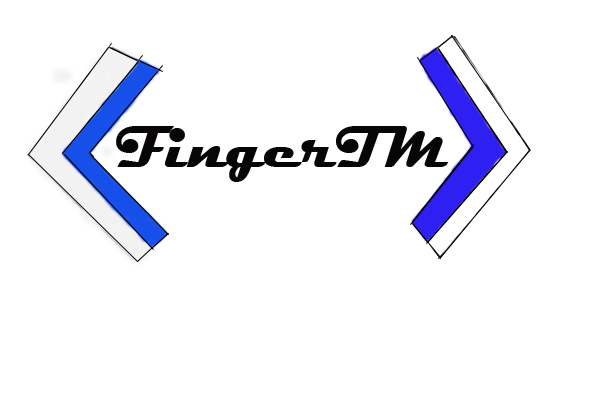
<style>
.page{position:relative;width:591px;height:399px;background:#ffffff}
.page>*{position:absolute;margin:0}
.t1{font:60px "Magneto-Bold";color:#070505}
</style>
<div class="page">
<p class="t1" style="left:116px;top:126px;width:332px;height:56px">FingerTM</p>
</div>
